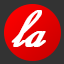
<style>
.page{position:relative;width:64px;height:64px;background:#333333}
.page>*{position:absolute;margin:0}
.t1{font:67.5px "FrenchScriptMT";color:#ffffff;font-weight:bold;scale:0.8 1}
</style>
<div class="page">
<p class="t1" style="left:11px;top:10px;width:35px;height:37px">la</p>
</div>
